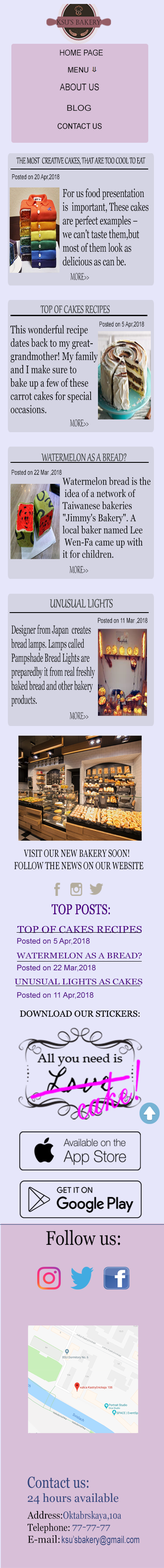
<style>
.page{position:relative;width:164px;height:1568px;background:#e6e6fa}
.page>*{position:absolute;margin:0}
.t1{font:8.1px "ArialMT";color:#050505;scale:0.91 1}
.t2{font:7.4px "ArialMT";color:#121212;scale:0.96 1}
.t3{font:9.3px "ArialMT";color:#050505;scale:0.84 1}
.t4{font:8.1px "ArialMT";color:#171717;scale:1.1 1}
.t5{font:7.8px "ArialMT";color:#080808;scale:0.9 1}
.t6{font:10.6px "Gabriola";color:#070808;scale:0.62 1}
.t7{font:6.7px "ArialMT";color:#070808;scale:0.7 1}
.t8{font:6.7px "Gabriola";color:#070808;scale:0.7 1}
.t9{font:11.4px "Georgia";color:#050505;scale:0.66 1}
.t10{font:12.2px "Gabriola";color:#070808;scale:0.55 1}
.t11{font:13.1px "Gabriola";color:#373b3a;scale:0.68 1}
.t12{font:11.1px "Georgia";color:#070808;scale:0.73 1}
.t13{font:10.1px "Georgia";color:#070808;scale:0.8 1}
.t14{font:14.5px "Gabriola";color:#373b3a;scale:0.72 1}
.t15{font:11.7px "Georgia";color:#070808;scale:0.53 1}
.t16{font:10.2px "Georgia";color:#060606;text-transform:uppercase;scale:0.67 1}
.t17{font:14.2px "Georgia";color:#4b0082;text-transform:uppercase;scale:0.74 1}
.t18{font:9.8px "Georgia";color:#4b0082;scale:1.11 1}
.t19{font:7.7px "ArialMT";color:#4b0082}
.t20{font:7.7px "Gabriola";color:#4b0082}
.t21{font:8.2px "Georgia";color:#4b0082;scale:1.11 1}
.t22{font:8.2px "Georgia";color:#4b0082;scale:1.14 1}
.t23{font:8.8px "Georgia";color:#060606;text-transform:uppercase}
.t24{font:19.7px "Georgia";color:#080809;scale:0.85 1}
.t25{font:15.8px "Georgia";color:#33467d;scale:0.8 1}
.t26{font:11.4px "Georgia";color:#33467d}
.t27{font:10.1px "Georgia";color:#050505;scale:0.9 1}
.t28{font:10.1px "Georgia";color:#33467d;scale:0.79 1}
.t29{font:10.1px "Georgia";color:#050505;scale:0.86 1}
.t30{font:8.8px "Georgia";color:#33467d;scale:1.16 1}
.t31{font:10.1px "Georgia";color:#050505}
.t32{font:10.1px "ArialMT";color:#33467d;scale:0.72 1}
</style>
<div class="page">
<p class="t1" style="left:60px;top:49px;width:43px;height:7px">HOME PAGE</p>
<p class="t2" style="left:68px;top:67px;width:20px;height:6px">MENU</p>
<p class="t3" style="left:60px;top:83px;width:39px;height:8px">ABOUT US</p>
<p class="t4" style="left:67px;top:105px;width:24px;height:6px">BLOG</p>
<p class="t5" style="left:57px;top:123px;width:45px;height:6px">CONTACT US</p>
<p class="t6" style="left:16px;top:157px;width:130px;height:8px">THE MOST  CREATIVE CAKES, THAT ARE TOO COOL TO EAT</p>
<p class="t7" style="left:12px;top:174px;width:48px;height:7px"><span class="t8"><br></span>Posted on 20 Apr,2018</p>
<p class="t9" style="left:63px;top:188px;width:86px;height:78px">For us food presentation <br>is  important, These cakes<br>are perfect examples – <br>we can't taste them,but <br>most of them look as <br>delicious as can be.</p>
<p class="t10" style="left:70px;top:273px;width:19px;height:7px">MORE&gt;&gt;</p>
<p class="t11" style="left:40px;top:305px;width:70px;height:9px">TOP OF CAKES RECIPES</p>
<p class="t12" style="left:10px;top:325px;width:88px;height:88px">This wonderful recipe <br>dates back to my great-<br>grandmother! My family<br>and I make sure to <br>bake up a few of these<br>carrot cakes for special<br>occasions.</p>
<p class="t7" style="left:99px;top:321px;width:45px;height:7px"><span class="t8"><br></span>Posted on 5 Apr,2018</p>
<p class="t10" style="left:70px;top:419px;width:19px;height:7px">MORE&gt;&gt;</p>
<p class="t11" style="left:41px;top:453px;width:86px;height:9px">WATERMELON AS A BREAD?</p>
<p class="t7" style="left:11px;top:470px;width:51px;height:6px"><span class="t8"><br></span>Posted on 22 Mar ,2018</p>
<p class="t13" style="left:63px;top:477px;width:88px;height:81px">Watermelon bread is the<br> idea of ​​a network of <br>Taiwanese bakeries <br>"Jimmy's Bakery". A <br>local baker named Lee<br> Wen-Fa came up with <br>it for children.</p>
<p class="t10" style="left:70px;top:566px;width:18px;height:7px">MORE&gt;&gt;</p>
<p class="t14" style="left:50px;top:599px;width:63px;height:9px">UNUSUAL LIGHTS</p>
<p class="t7" style="left:98px;top:618px;width:50px;height:6px"><span class="t8"><br></span>Posted on 11 Mar ,2018</p>
<p class="t15" style="left:11px;top:624px;width:84px;height:82px">Designer from Japan  creates<br>bread lamps. Lamps called<br>Pampshade Bread Lights are <br>preparedby it from real freshly <br>baked bread and other bakery <br>products.</p>
<p class="t10" style="left:70px;top:712px;width:18px;height:7px">MORE&gt;&gt;</p>
<p class="t16" style="left:14px;top:849px;width:130px;height:21px">Visit our new bakery soon!<br>Follow the news on our website</p>
<p class="t17" style="left:52px;top:904px;width:58px;height:11px">TOP POSTS:</p>
<p class="t18" style="left:17px;top:926px;width:125px;height:7px">TOP OF CAKES RECIPES</p>
<p class="t19" style="left:17px;top:938px;width:73px;height:7px"><span class="t20"><br></span>Posted on 5 Apr,2018</p>
<p class="t21" style="left:17px;top:952px;width:125px;height:6px">WATERMELON AS A BREAD?</p>
<p class="t19" style="left:17px;top:965px;width:79px;height:7px"><span class="t20"><br></span>Posted on 22 Mar,2018</p>
<p class="t22" style="left:14px;top:979px;width:129px;height:6px">UNUSUAL LIGHTS AS CAKES</p>
<p class="t19" style="left:17px;top:992px;width:77px;height:7px"><span class="t20"><br></span>Posted on 11 Apr,2018</p>
<p class="t23" style="left:20px;top:1010px;width:120px;height:7px">Download our stickers:</p>
<p class="t24" style="left:46px;top:1230px;width:74px;height:15px">Follow us:</p>
<p class="t25" style="left:28px;top:1476px;width:61px;height:12px">Contact us:</p>
<p class="t26" style="left:28px;top:1493px;width:91px;height:11px">24 hours available</p>
<p class="t27" style="left:27px;top:1511px;width:35px;height:8px">Address:</p>
<p class="t28" style="left:63px;top:1511px;width:58px;height:10px">Oktabrskaya,10a</p>
<p class="t29" style="left:28px;top:1523px;width:42px;height:10px">Telephone:</p>
<p class="t30" style="left:73px;top:1525px;width:37px;height:6px">77-77-77</p>
<p class="t31" style="left:28px;top:1535px;width:32px;height:8px">E-mail:</p>
<p class="t32" style="left:62px;top:1536px;width:78px;height:9px">ksu’sbakery@gmail.com</p>
</div>
